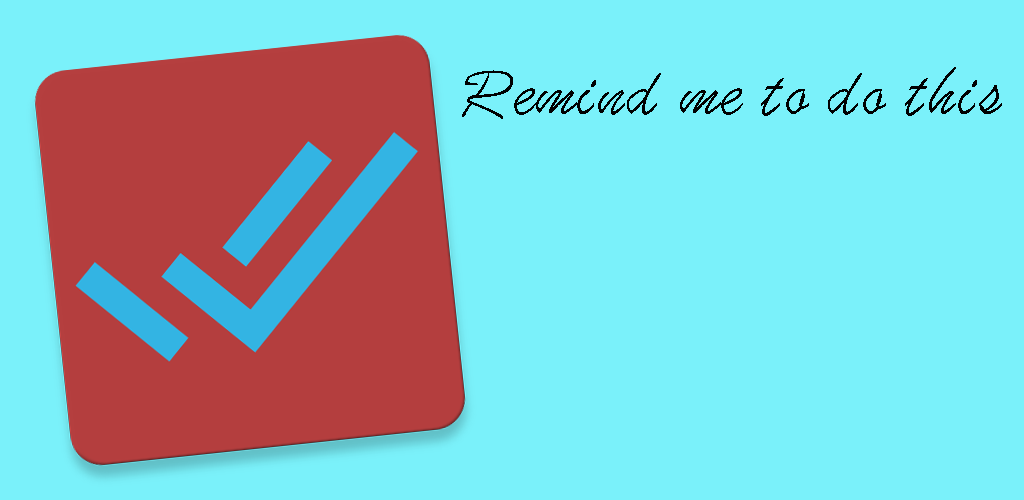
<style>
.page{position:relative;width:1024px;height:500px;background:#7af1fa}
.page>*{position:absolute;margin:0}
.t1{font:72px "STXingkai-SC-Light";color:#010101}
</style>
<div class="page">
<p class="t1" style="left:462px;top:67px;width:540px;height:52px">Remind me to do this</p>
</div>
